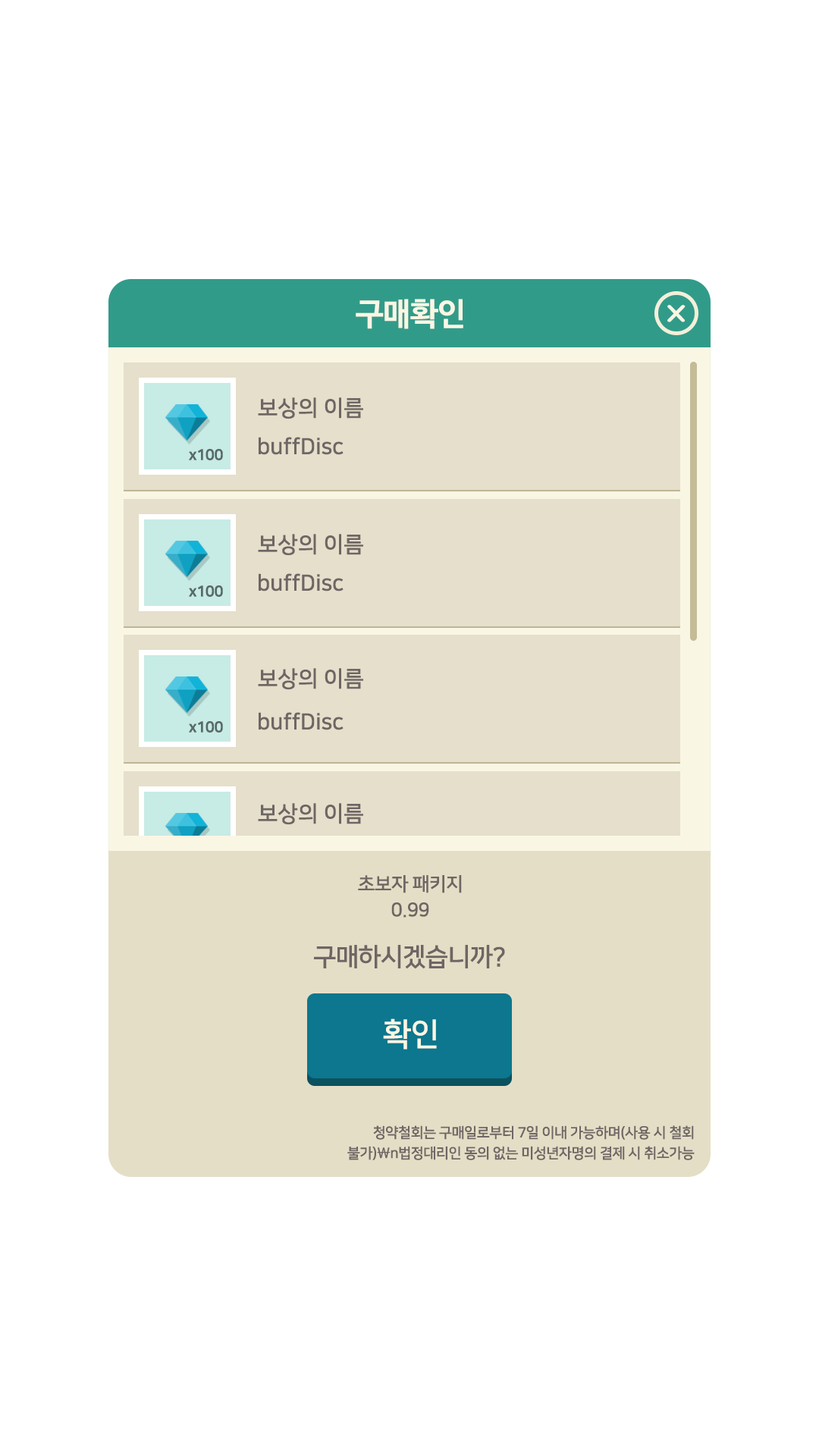
<style>
.page{position:relative;width:819px;height:1456px;background:#ffffff}
.page>*{position:absolute;margin:0}
.t1{font:31.6px "NanumBarunGothicBold";letter-spacing:-0.025em;color:#faf6e4}
.t2{font:30.3px "DXLBaB-KSCpc-EUC-H";letter-spacing:-0.025em;color:#faf6e4;scale:1.3 1}
.t3{font:22.1px "NanumSquareOTFB";color:#6e6664}
.t4{font:14.5px "NanumSquareOTFB";letter-spacing:-0.025em;color:#586a67;font-weight:bold}
.t5{font:19px/25.9px "NanumSquareOTFB";letter-spacing:-0.025em;color:#6e6664}
.t6{font:25.3px "NanumSquareOTFB";letter-spacing:-0.025em;color:#6e6664}
.t7{font:31.6px "NanumSquareOTFB";letter-spacing:-0.025em;color:#faf6e4}
.t8{font:14.2px/20.5px "NanumSquareOTFB";letter-spacing:-0.025em;color:#6e6664}
</style>
<div class="page">
<p class="t1" style="left:356px;top:299px;width:107px;height:30px">구매확인</p>
<p class="t2" style="left:667px;top:305px;width:19px;height:17px">x</p>
<p class="t3" style="left:258px;top:397px;width:105px;height:22px">보상의 이름</p>
<p class="t3" style="left:259px;top:437px;width:85px;height:18px">buffDisc</p>
<p class="t4" style="left:189px;top:449px;width:34px;height:11px">x100</p>
<p class="t3" style="left:258px;top:534px;width:105px;height:22px">보상의 이름</p>
<p class="t3" style="left:259px;top:573px;width:85px;height:18px">buffDisc</p>
<p class="t4" style="left:189px;top:585px;width:34px;height:12px">x100</p>
<p class="t3" style="left:258px;top:668px;width:105px;height:22px">보상의 이름</p>
<p class="t3" style="left:259px;top:712px;width:85px;height:18px">buffDisc</p>
<p class="t4" style="left:189px;top:721px;width:34px;height:12px">x100</p>
<p class="t3" style="left:258px;top:803px;width:105px;height:22px">보상의 이름</p>
<p class="t5" style="left:358px;top:875px;width:104px;height:43px;text-align:center">초보자 패키지<br>0.99</p>
<p class="t6" style="left:314px;top:945px;width:191px;height:24px">구매하시겠습니까?</p>
<p class="t7" style="left:383px;top:1018px;width:54px;height:32px">확인</p>
<p class="t8" style="left:347px;top:1125px;width:348px;height:35px;text-align:right">청약철회는 구매일로부터 7일 이내 가능하며(사용 시 철회<br>불가)\n법정대리인 동의 없는 미성년자명의 결제 시 취소가능</p>
</div>
